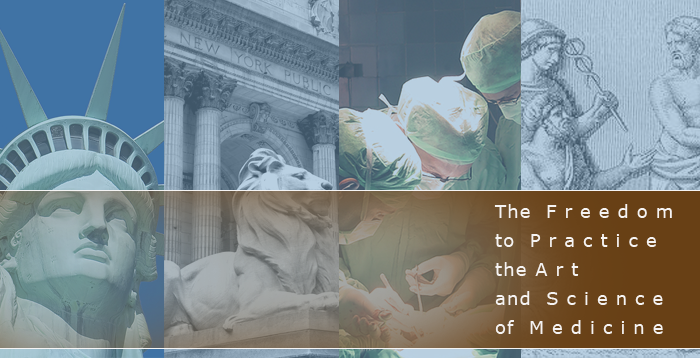
<style>
.page{position:relative;width:700px;height:358px}
.page>*{position:absolute;margin:0}
.t1{font:18px/29px "Verdana";letter-spacing:0.445em;color:#f5f3f3}
.t2{font:18px/29px "Verdana";letter-spacing:0.065em;color:#f5f3f3}
</style>
<div class="page">
<p class="t1" style="left:494px;top:204px;width:178px;height:130px"><span class="t2">The</span> Freedom<br><span class="t2">to</span> Practice<br><span class="t2">the </span>Art<br><span class="t2">and</span> Science <br><span class="t2">of</span> Medicine</p>
</div>
